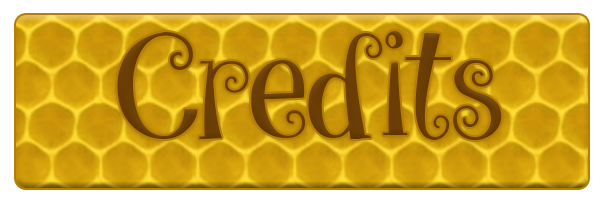
<style>
.page{position:relative;width:600px;height:200px}
.page>*{position:absolute;margin:0}
.t1{font:146.5px "give_me_some_sugar";color:#693d03}
</style>
<div class="page">
<p class="t1" style="left:117px;top:31px;width:385px;height:109px">Credits</p>
</div>
